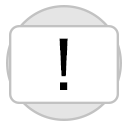
<style>
.page{position:relative;width:128px;height:128px;background:#ffffff}
.page>*{position:absolute;margin:0}
.t1{font:70.4px "LeagueGothic-Regular";color:#000000;text-transform:uppercase}
</style>
<div class="page">
<p class="t1" style="left:59px;top:38px;width:9px;height:52px">!</p>
</div>
